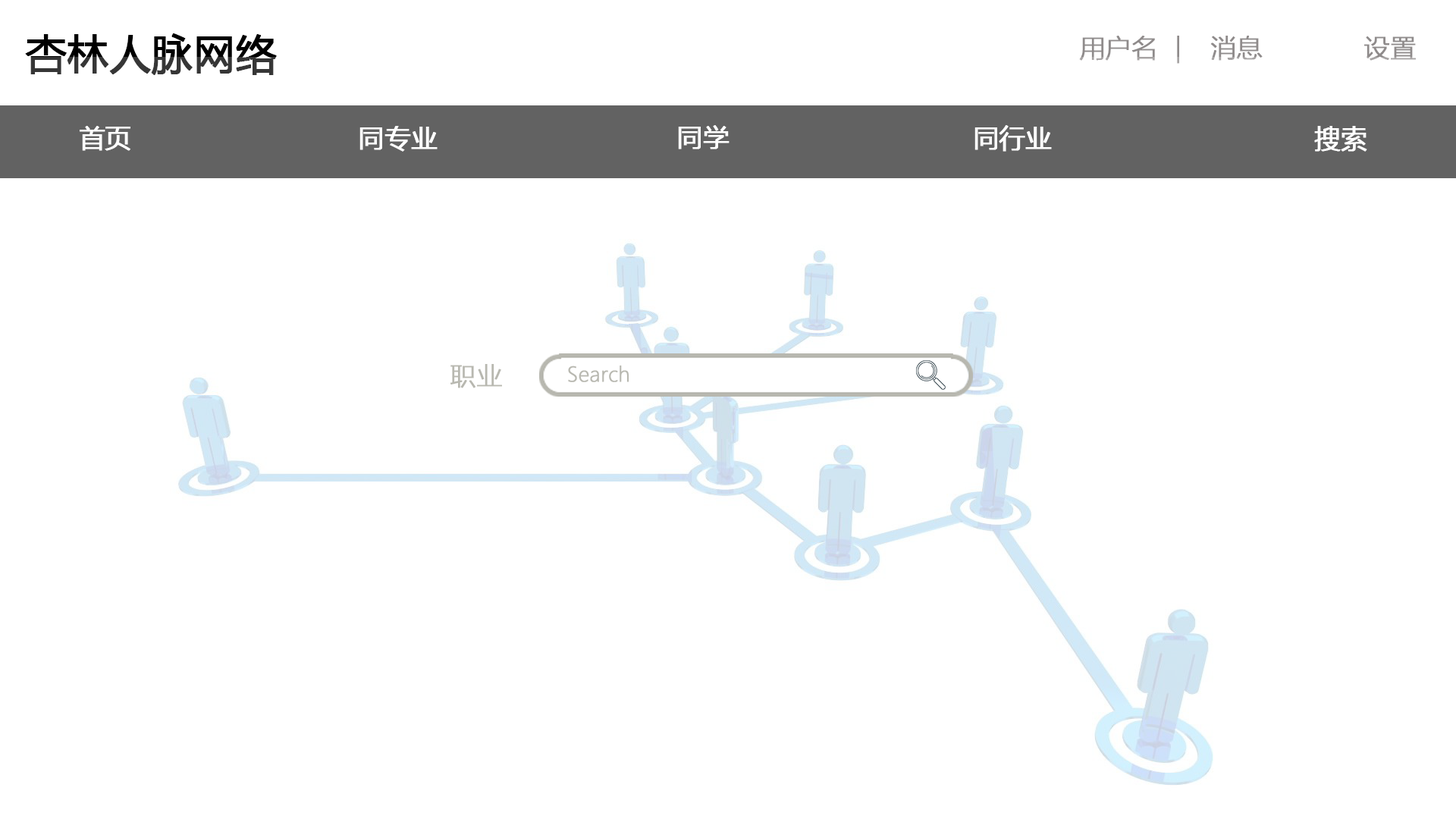
<style>
.page{position:relative;width:1456px;height:819px;background:#ffffff}
.page>*{position:absolute;margin:0}
.t1{font:40.9px "MicrosoftYaHei";font-weight:bold}
.t2{font:25.8px "MicrosoftYaHeiLight";color:#8f8b8b;font-weight:bold}
.t3{font:25.8px "MicrosoftYaHei";color:#ffffff;font-weight:bold}
.t4{font:25.8px "MicrosoftYaHeiLight";color:#b8b8b0;font-weight:bold}
.t5{font:19.9px "MicrosoftYaHeiLight";color:#b8b8b0;font-weight:bold}
</style>
<div class="page">
<p class="t1" style="left:25px;top:33px;width:252px;height:42px">杏林人脉网络</p>
<p class="t2" style="left:1079px;top:36px;width:100px;height:28px">用户名  |</p>
<p class="t2" style="left:1210px;top:36px;width:53px;height:25px">消息</p>
<p class="t2" style="left:1364px;top:36px;width:52px;height:25px">设置</p>
<p class="t3" style="left:80px;top:126px;width:50px;height:25px">首页</p>
<p class="t3" style="left:359px;top:126px;width:79px;height:26px">同专业</p>
<p class="t3" style="left:678px;top:125px;width:52px;height:24px">同学</p>
<p class="t3" style="left:974px;top:125px;width:78px;height:27px">同行业</p>
<p class="t3" style="left:1314px;top:126px;width:53px;height:26px">搜索</p>
<p class="t4" style="left:450px;top:364px;width:52px;height:24px">职业</p>
<p class="t5" style="left:568px;top:365px;width:61px;height:17px">Search</p>
</div>
